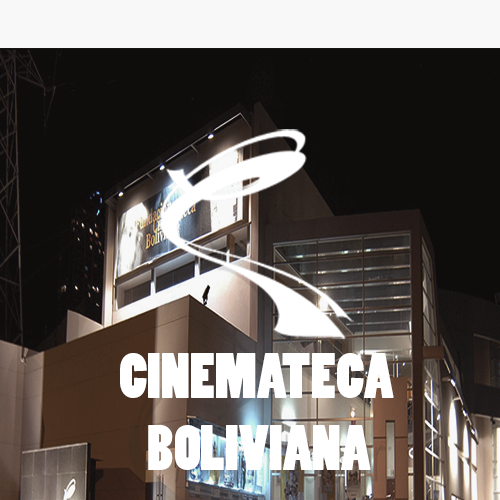
<style>
.page{position:relative;width:500px;height:500px;background:#0f0c0c}
.page>*{position:absolute;margin:0}
.t1{font:60px "PoplarStd";color:#ffffff}
</style>
<div class="page">
<p class="t1" style="left:120px;top:353px;width:274px;height:117px;text-align:center">CINEMATECA <br>BOLIVIANA</p>
</div>
